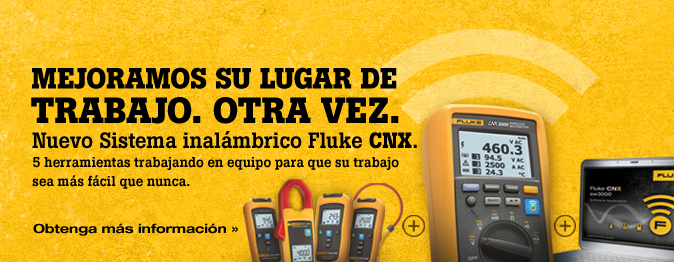
<style>
.page{position:relative;width:674px;height:262px}
.page>*{position:absolute;margin:0}
.t1{font:29px "BotonPro-Bold";letter-spacing:-0.005em;color:#000000;text-transform:uppercase}
.t2{font:36px "BotonPro-Bold";letter-spacing:-0.005em;color:#000000;text-transform:uppercase}
.t3{font:14px/18.8px "BotonPro-Medium";letter-spacing:-0.01em;color:#000000}
.t4{font:22px/18.8px "BotonPro-Medium";letter-spacing:-0.01em;color:#000000}
.t5{font:22px/18.8px "BotonPro-Bold";letter-spacing:-0.01em;color:#000000}
.t6{font:12.5px "HelveticaNeueLTStd-BdEx";letter-spacing:-0.01em;color:#000000}
</style>
<div class="page">
<p class="t1" style="left:32px;top:67px;width:365px;height:22px">Mejoramos su lugar de</p>
<p class="t2" style="left:31px;top:97px;width:368px;height:27px">trabajo. Otra vez.</p>
<p class="t3" style="left:32px;top:131px;width:385px;height:58px"><span class="t4">Nuevo Sistema inalámbrico Fluke </span><span class="t5">CNX</span><span class="t4">.<br></span>5 herramientas trabajando en equipo para que su trabajo sea más fácil que nunca.</p>
<p class="t6" style="left:33px;top:223px;width:205px;height:13px">Obtenga más información »</p>
</div>
